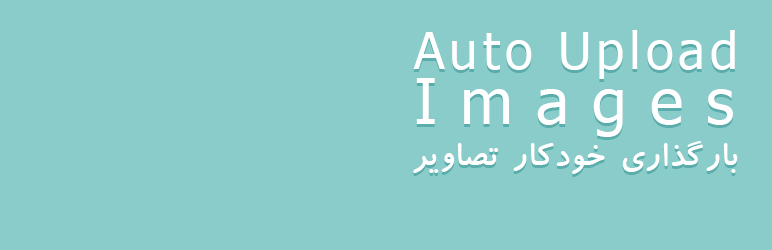
<style>
.page{position:relative;width:772px;height:250px;background:#89ccca}
.page>*{position:absolute;margin:0}
.t1{font:50.6px/55px "Tahoma";letter-spacing:0.1em;color:#ffffff}
.t2{font:63.3px/55px "Tahoma";letter-spacing:0.36em;color:#ffffff}
.t3{font:36px "BKoodakBold";letter-spacing:0.035em;color:#ffffff}
</style>
<div class="page">
<p class="t1" style="left:413px;top:30px;width:322px;height:107px">Auto Upload <br><span class="t2">Images</span></p>
<p class="t3" style="left:413px;top:141px;width:325px;height:33px">بارگذاری خودکار تصاویر</p>
</div>
